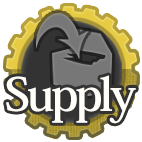
<style>
.page{position:relative;width:142px;height:142px;background:#ffffff}
.page>*{position:absolute;margin:0}
.t1{font:48px "HeiseiMinStd-W7";letter-spacing:-0.04em;color:#fffef9}
</style>
<div class="page">
<p class="t1" style="left:6px;top:75px;width:130px;height:49px">Supply</p>
</div>
